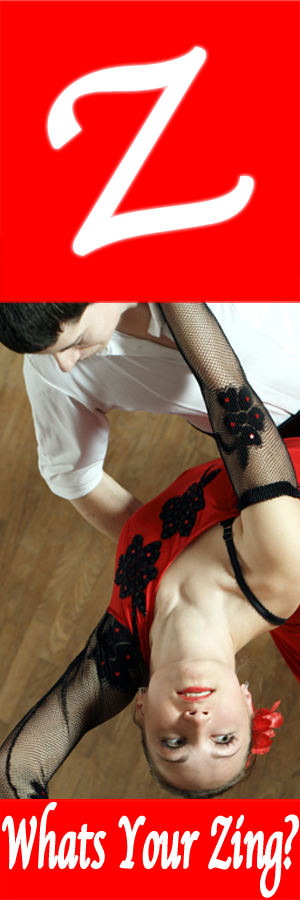
<style>
.page{position:relative;width:300px;height:900px;background:#ff0000}
.page>*{position:absolute;margin:0}
.t1{font:247.7px "Apple-Chancery";color:#ffffff;font-weight:bold;scale:1.41 1}
.t2{font:72.6px "Apple-Chancery";color:#ffffff;font-weight:bold;scale:0.51 1}
</style>
<div class="page">
<p class="t1" style="left:47px;top:46px;width:207px;height:210px;rotate:-14deg">Z</p>
<p class="t2" style="left:3px;top:803px;width:295px;height:94px">Whats Your Zing?</p>
</div>
